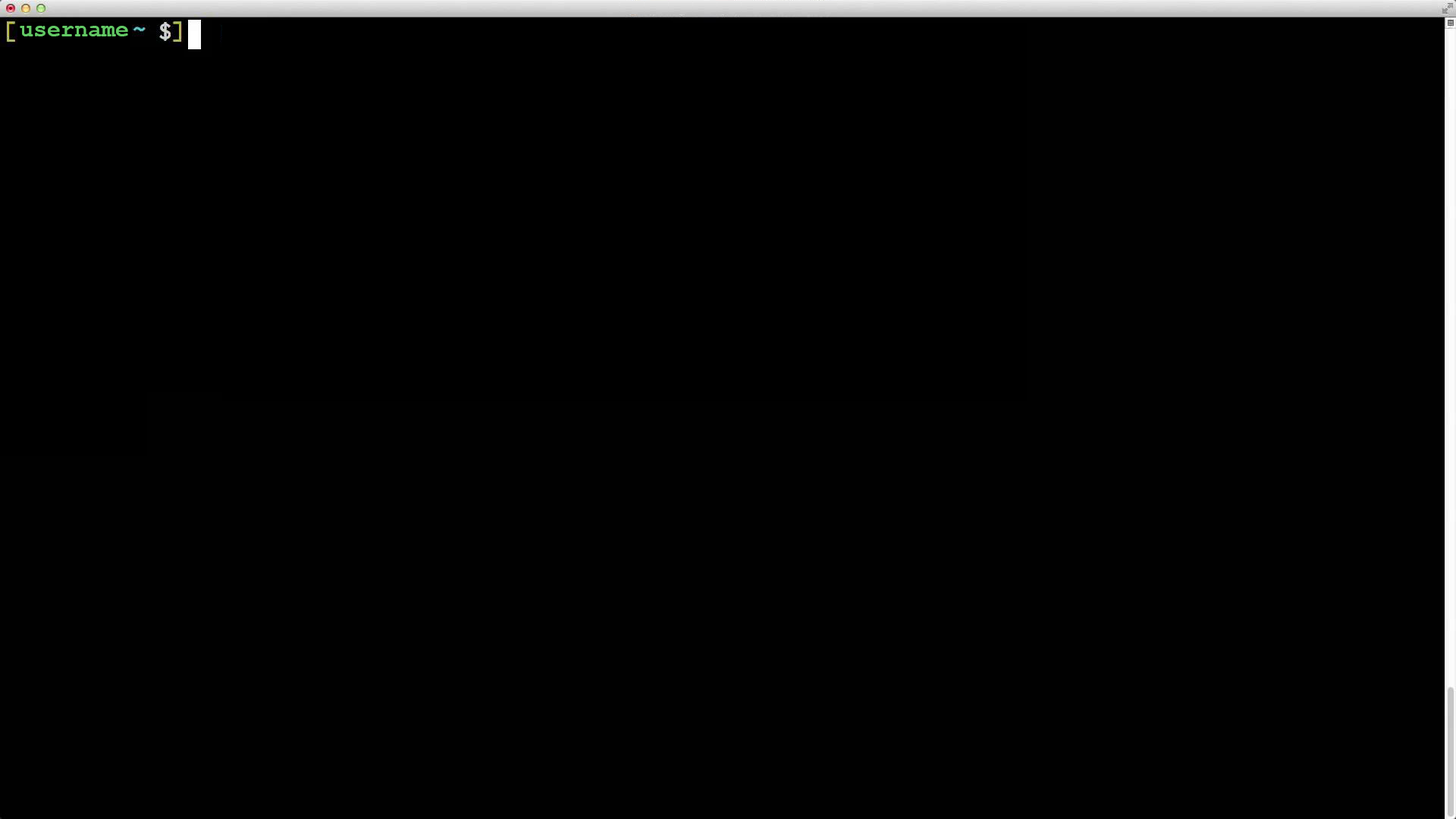
<style>
.page{position:relative;width:1456px;height:819px;background:#010101}
.page>*{position:absolute;margin:0}
.t1{font:22.7px "CourierNewPS-BoldMT";color:#62c864}
</style>
<div class="page">
<p class="t1" style="left:20px;top:26px;width:108px;height:10px">username</p>
</div>
